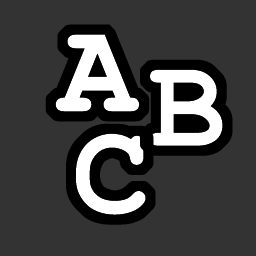
<style>
.page{position:relative;width:256px;height:256px;background:#333333}
.page>*{position:absolute;margin:0}
.t1{font:128px "CourierNewPS-BoldMT";color:#ffffff;font-weight:bold}
</style>
<div class="page">
<p class="t1" style="left:55px;top:34px;width:85px;height:78px">A</p>
<p class="t1" style="left:150px;top:69px;width:73px;height:77px">B</p>
<p class="t1" style="left:76px;top:133px;width:70px;height:82px">C</p>
</div>
